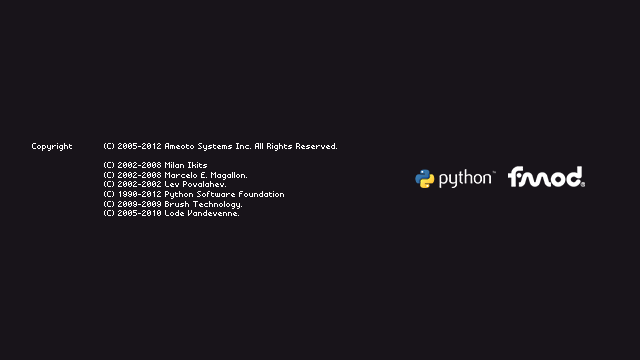
<style>
.page{position:relative;width:640px;height:360px;background:#18141a}
.page>*{position:absolute;margin:0}
.t1{font:8px "BMminiA8";color:#fffefe}
</style>
<div class="page">
<p class="t1" style="left:32px;top:143px;width:305px;height:73px">Copyright (C) 2005-2012 Ameoto Systems Inc. All Rights Reserved.<br><br>  (C) 2002-2008 Milan Ikits <br>  (C) 2002-2008 Marcelo E. Magallon.<br>  (C) 2002-2002 Lev Povalahev.<br>  (C) 1990-2012 Python Software Foundation<br>  (C) 2009-2009 Brush Technology.<br>  (C) 2005-2010 Lode Vandevenne.</p>
</div>
